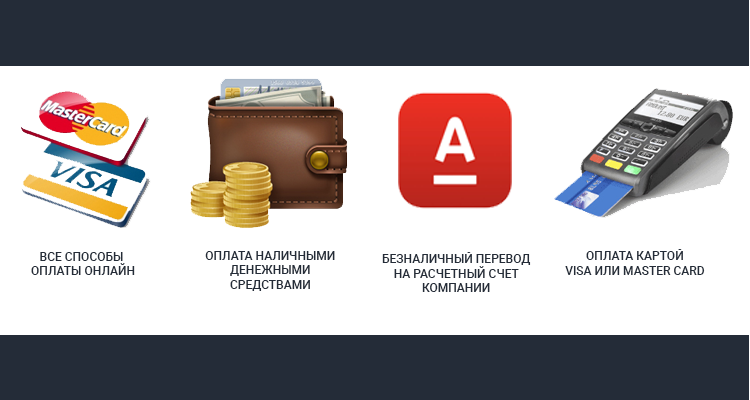
<style>
.page{position:relative;width:750px;height:400px;background:#ffffff}
.page>*{position:absolute;margin:0}
.t1{font:12px "Roboto-Medium";color:#242c38}
</style>
<div class="page">
<p class="t1" style="left:31px;top:252px;width:104px;height:23px;text-align:center">ВСЕ СПОСОБЫ <br>ОПЛАТЫ ОНЛАЙН</p>
<p class="t1" style="left:205px;top:251px;width:130px;height:40px;text-align:center">ОПЛАТА НАЛИЧНЫМИ<br>ДЕНЕЖНЫМИ<br>СРЕДСТВАМИ</p>
<p class="t1" style="left:382px;top:252px;width:149px;height:40px;text-align:center">БЕЗНАЛИЧНЫЙ ПЕРЕВОД<br>НА РАСЧЕТНЫЙ СЧЕТ<br>КОМПАНИИ</p>
<p class="t1" style="left:565px;top:249px;width:140px;height:26px;text-align:center">ОПЛАТА КАРТОЙ<br>VISA ИЛИ MASTER CARD</p>
</div>
